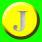
<style>
.page{position:relative;width:42px;height:42px;background:#18ff00}
.page>*{position:absolute;margin:0}
.t1{font:30px "TimesNewRomanPS-BoldMT"}
</style>
<div class="page">
<p class="t1" style="left:13px;top:11px;width:15px;height:21px">J</p>
</div>
